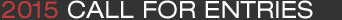
<style>
.page{position:relative;width:342px;height:20px;background:#333333}
.page>*{position:absolute;margin:0}
.t1{font:23.8px "HelveticaNeueLTStd-Ex";color:#ffffff;text-transform:uppercase}
.t2{font:23.8px "HelveticaNeueLTStd-Ex";color:#c13b3c;text-transform:uppercase}
</style>
<div class="page">
<p class="t1" style="left:2px;top:0px;width:311px;height:19px"><span class="t2">2015</span> Call For Entries</p>
</div>
